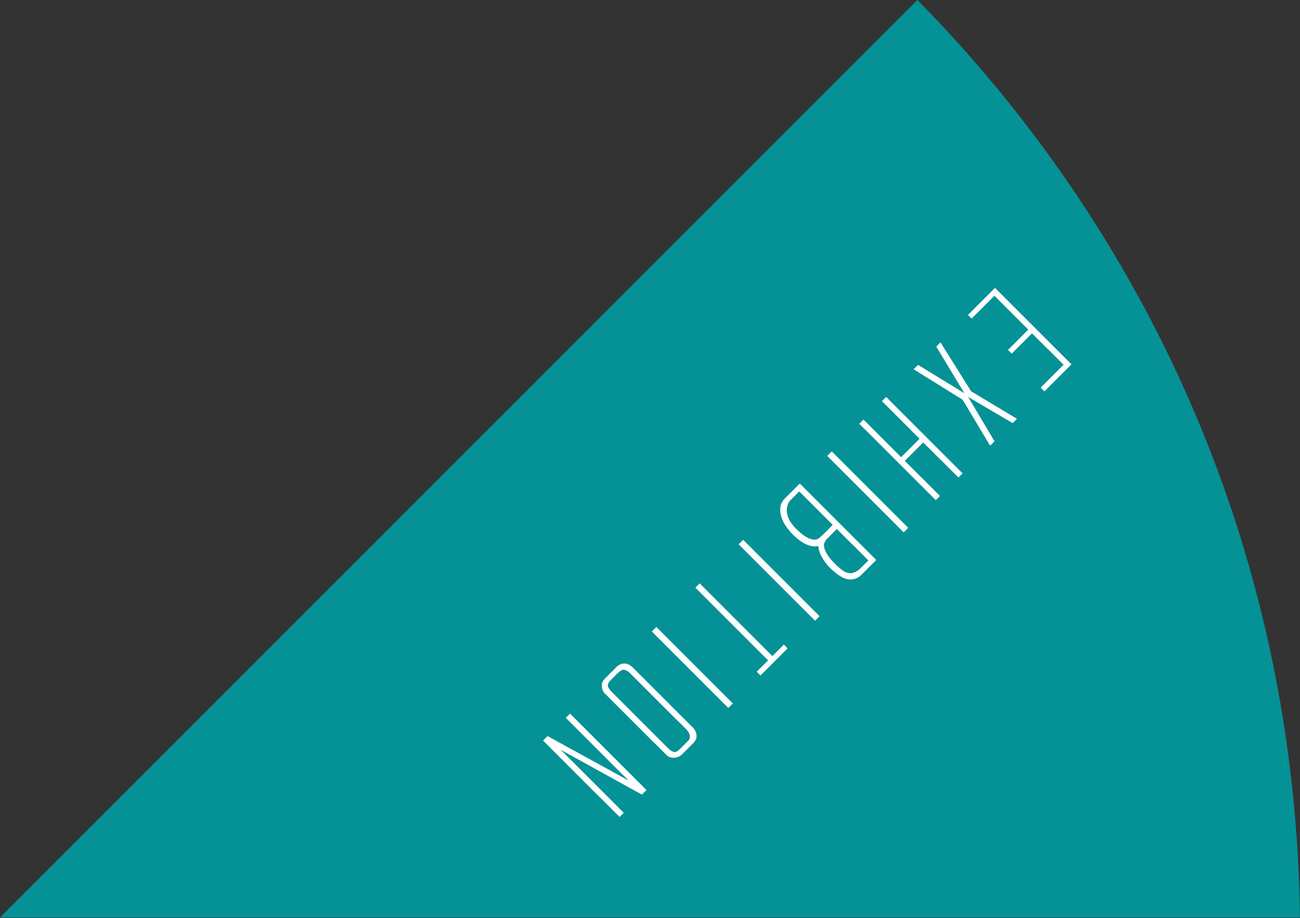
<style>
.page{position:relative;width:1300px;height:918px;background:#049296}
.page>*{position:absolute;margin:0}
.t1{font:143.4px "AlienLeagueExpanded";color:#ffffff}
</style>
<div class="page">
<p class="t1" style="left:543px;top:287px;width:528px;height:530px;rotate:135deg">Exhibition</p>
</div>
